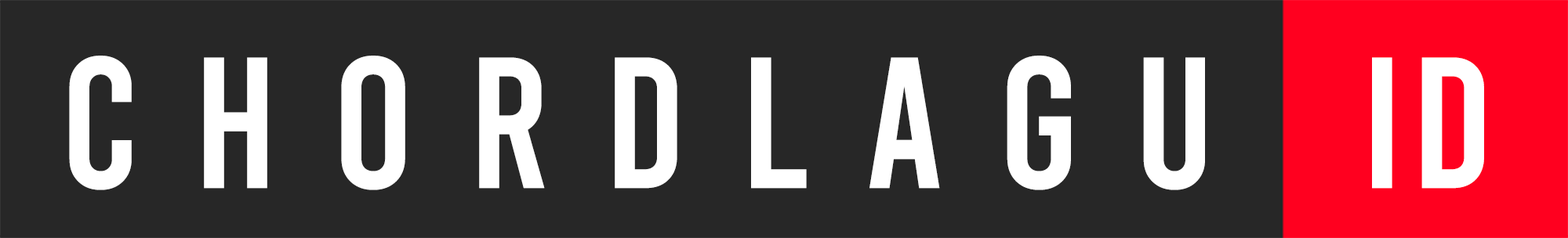
<style>
.page{position:relative;width:1568px;height:238px;background:#272727}
.page>*{position:absolute;margin:0}
.t1{font:186.5px "Bebas-Regular";letter-spacing:0.046em;color:#ffffff}
</style>
<div class="page">
<p class="t1" style="left:69px;top:56px;width:1415px;height:135px">C h o r d l a g u   id</p>
</div>
